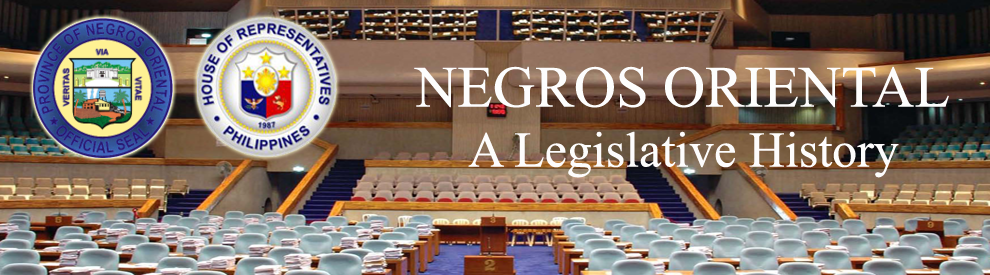
<style>
.page{position:relative;width:990px;height:275px}
.page>*{position:absolute;margin:0}
.t1{font:50px "TimesNewRomanPSMT";color:#fdfcfc}
.t2{font:58.3px "TimesNewRomanPSMT";color:#fdfdfd}
</style>
<div class="page">
<p class="t1" style="left:414px;top:66px;width:535px;height:112px;text-align:center"><span class="t2">NEGROS ORIENTAL<br></span>A Legislative History</p>
</div>
